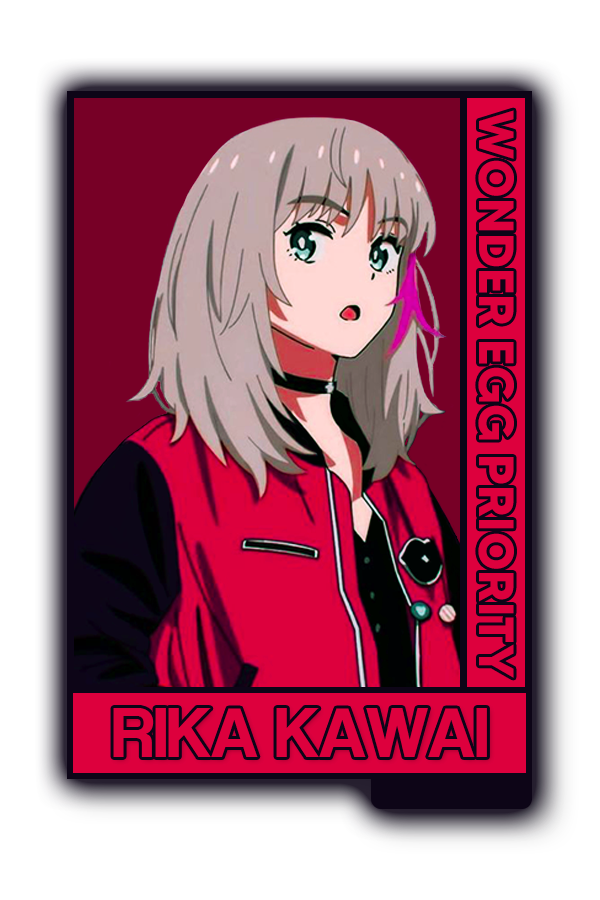
<style>
.page{position:relative;width:600px;height:900px;background:#ffffff}
.page>*{position:absolute;margin:0}
.t1{font:49.2px "MADETOMMY-Bold";color:#dd003d}
.t2{font:72.6px "CoolveticaRg-Regular";color:#dd003d}
</style>
<div class="page">
<p class="t1" style="left:478px;top:110px;width:36px;height:568px;rotate:90deg">WONDER EGG PRIORITY</p>
<p class="t2" style="left:113px;top:708px;width:374px;height:49px">RIKA KAWAI</p>
</div>
